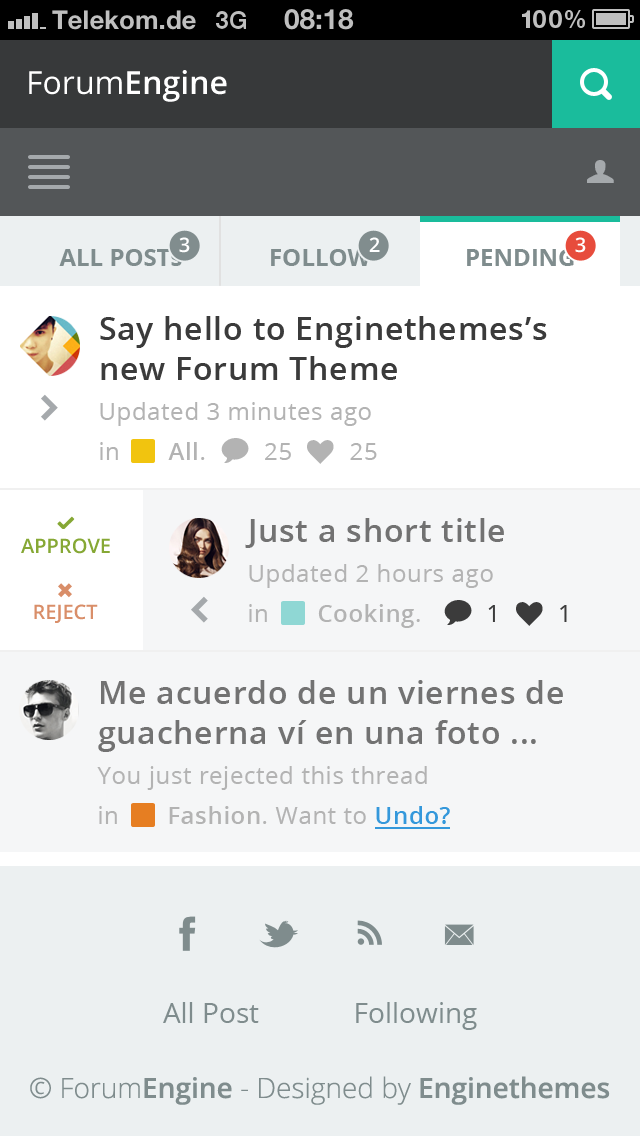
<style>
.page{position:relative;width:640px;height:1136px;background:#ecf0f1}
.page>*{position:absolute;margin:0}
.t1{font:32px "OpenSans-Semibold";color:#ffffff}
.t2{font:32px "OpenSans";color:#ffffff}
.t3{font:32px "PictosRIP";color:#a5a9ac}
.t4{font:20px "OpenSans-Semibold";color:#ffffff;text-transform:uppercase}
.t5{font:24px "OpenSans-Bold";color:#7f8c8d}
.t6{font:32px/40px "OpenSans-Semibold";letter-spacing:0.025em;color:#3b3b3b}
.t7{font:24px/40px "OpenSans";letter-spacing:0.025em;color:#b3b3b3}
.t8{font:24px/40px "OpenSans-Semibold";letter-spacing:0.025em;color:#b3b3b3}
.t9{font:32px/40px "PictosRIP";letter-spacing:0.025em;color:#b3b3b3}
.t10{font:20px/24px "OpenSans-Semibold";color:#86a835}
.t11{font:20px/24px "PictosRIP";color:#86a835}
.t12{font:32px "OpenSans-Semibold";letter-spacing:0.025em;color:#727272}
.t13{font:32px/40px "PictosRIP";letter-spacing:0.025em;color:#3b3b3b}
.t14{font:24px/40px "OpenSans";letter-spacing:0.025em;color:#3b3b3b}
.t15{font:20px/23px "OpenSans-Semibold";color:#d98e69}
.t16{font:20px/23px "PictosRIP";color:#d98e69}
.t17{font:32px/40px "OpenSans-Semibold";letter-spacing:0.025em;color:#727272}
.t18{font:24px/40px "OpenSans-Semibold";letter-spacing:0.025em;color:#3498db}
.t19{font:28px "OpenSans";color:#7f8c8d}
.t20{font:28px "OpenSans-Light";color:#7f8c8d}
.t21{font:28px "OpenSans-Semibold";color:#7f8c8d}
</style>
<div class="page">
<p class="t1" style="left:29px;top:70px;width:198px;height:32px"><span class="t2">Forum</span>Engine</p>
<p class="t3" style="left:587px;top:160px;width:27px;height:23px">U</p>
<p class="t4" style="left:179px;top:237px;width:11px;height:16px">3</p>
<p class="t4" style="left:369px;top:237px;width:11px;height:15px">2</p>
<p class="t4" style="left:575px;top:237px;width:11px;height:16px">3</p>
<p class="t5" style="left:59px;top:249px;width:123px;height:17px">ALL POSTs</p>
<p class="t5" style="left:271px;top:249px;width:100px;height:17px">FOLLOW</p>
<p class="t5" style="left:467px;top:249px;width:107px;height:17px">PENDING</p>
<p class="t6" style="left:100px;top:316px;width:447px;height:64px">Say hello to Enginethemes’s  new Forum Theme</p>
<p class="t7" style="left:100px;top:402px;width:277px;height:62px">Updated 3 minutes ago<br>in       <span class="t8">All</span>.  <span class="t9">w</span>  25  <span class="t9">k</span>  25</p>
<p class="t10" style="left:21px;top:516px;width:89px;height:38px;text-align:center"><span class="t11">3<br></span>APPROVE</p>
<p class="t12" style="left:245px;top:518px;width:259px;height:30px">Just a short title</p>
<p class="t7" style="left:249px;top:564px;width:318px;height:64px">Updated 2 hours ago<br>in       <span class="t8">Cooking</span>.   <span class="t13">w</span><span class="t14">  1  </span><span class="t13">k</span><span class="t14">  1</span></p>
<p class="t15" style="left:34px;top:583px;width:64px;height:40px;text-align:center"><span class="t16">*<br></span>REJECT</p>
<p class="t17" style="left:98px;top:680px;width:465px;height:72px">Me acuerdo de un viernes de guacherna ví en una foto ...</p>
<p class="t7" style="left:97px;top:766px;width:353px;height:58px">You just rejected this thread <br>in       <span class="t8">Fashion</span>. Want to <span class="t18">Undo?</span></p>
<p class="t19" style="left:163px;top:1002px;width:314px;height:28px">All Post             Following</p>
<p class="t20" style="left:30px;top:1076px;width:580px;height:29px">© Forum<span class="t21">Engine</span> - Designed by <span class="t21">Enginethemes</span></p>
</div>
